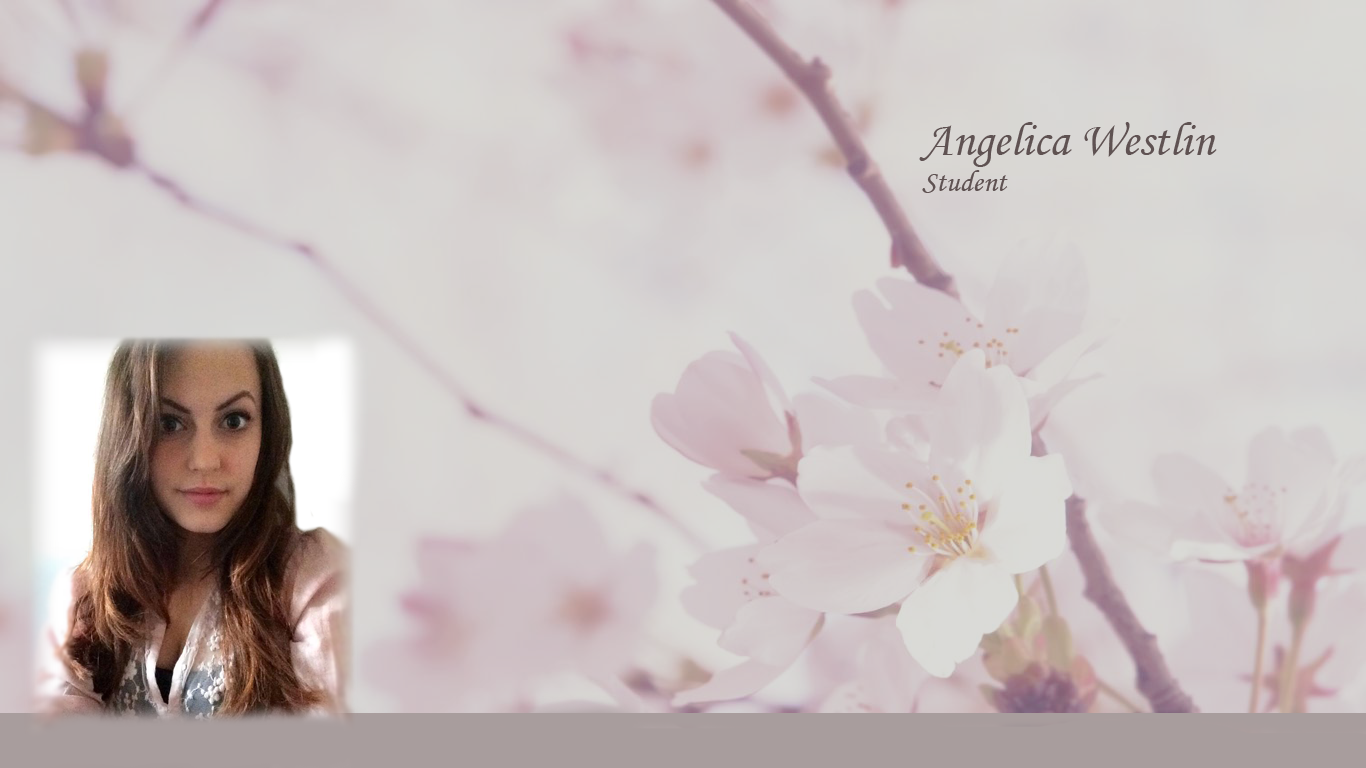
<style>
.page{position:relative;width:1366px;height:768px}
.page>*{position:absolute;margin:0}
.t1{font:48px "MonotypeCorsiva";color:#5f5252}
.t2{font:30px "MonotypeCorsiva";color:#5f5252}
</style>
<div class="page">
<p class="t1" style="left:919px;top:122px;width:298px;height:71px">Angelica Westlin<br><span class="t2">Student</span></p>
</div>
